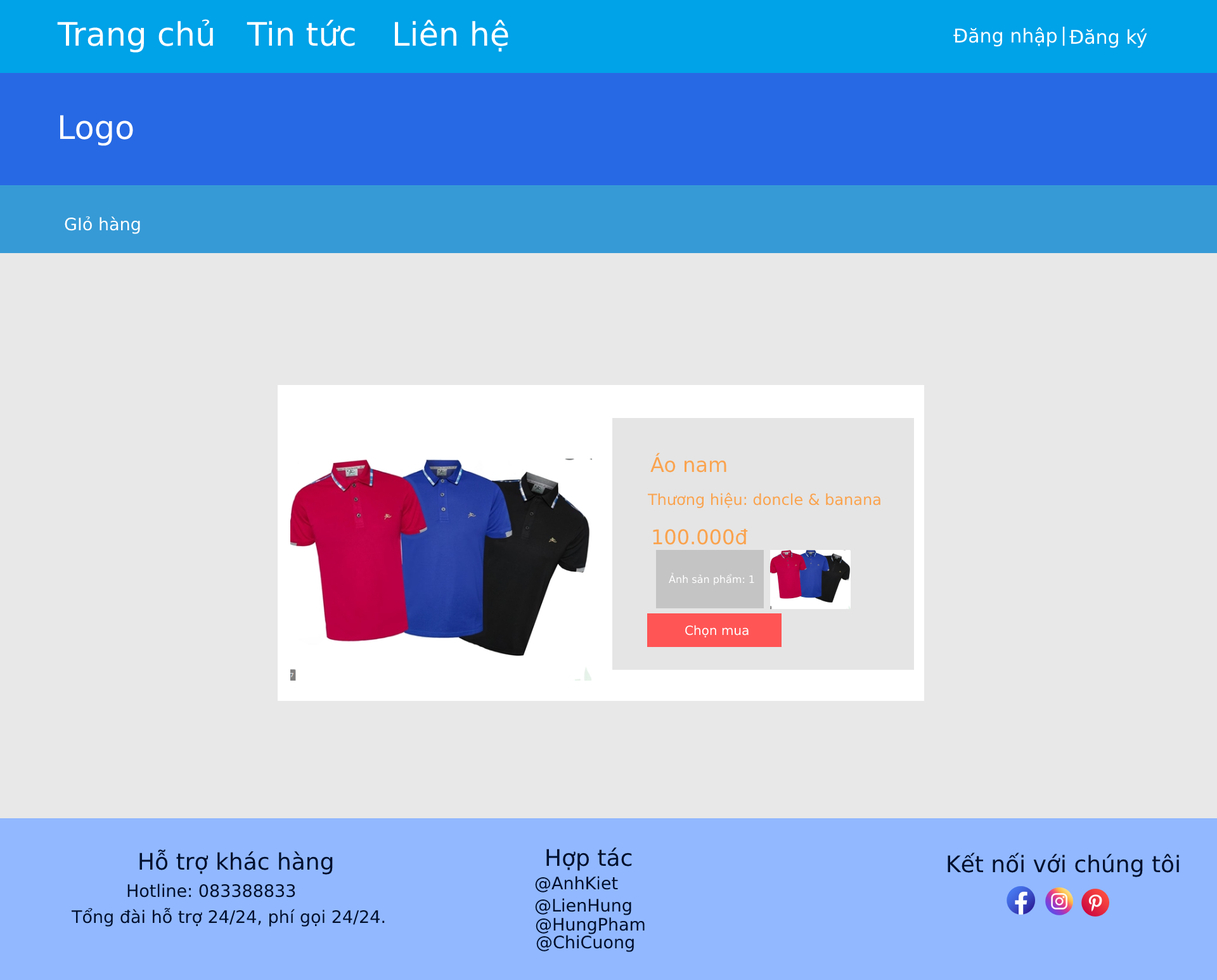
<style>
.page{position:relative;width:1217px;height:980px;background:#e8e8e8}
.page>*{position:absolute;margin:0}
.t1{font:32.3px "DejaVuSans";color:#ffffff}
.t2{font:19px "DejaVuSans";color:#ffffff}
.t3{font:17.1px "DejaVuSans";color:#ffffff}
.t4{font:20.3px "DejaVuSans";color:#faa34e}
.t5{font:15.2px "DejaVuSans";color:#faa34e}
.t6{font:10.1px "DejaVuSans";color:#ffffff}
.t7{font:12.7px "DejaVuSans";color:#ffffff}
.t8{font:22.8px "DejaVuSans";color:#00102e}
.t9{font:17.1px "DejaVuSans";color:#00102e}
</style>
<div class="page">
<p class="t1" style="left:57px;top:19px;width:156px;height:34px">Trang chủ</p>
<p class="t1" style="left:247px;top:20px;width:108px;height:26px">Tin tức</p>
<p class="t1" style="left:395px;top:20px;width:113px;height:32px">Liên hệ</p>
<p class="t2" style="left:954px;top:27px;width:104px;height:20px">Đăng nhập</p>
<p class="t2" style="left:1063px;top:27px;width:2px;height:19px">|</p>
<p class="t2" style="left:1070px;top:29px;width:78px;height:19px">Đăng ký</p>
<p class="t1" style="left:60px;top:115px;width:73px;height:31px">Logo</p>
<p class="t3" style="left:65px;top:216px;width:75px;height:18px">GIỏ hàng</p>
<p class="t4" style="left:651px;top:453px;width:76px;height:19px">Áo nam</p>
<p class="t5" style="left:647px;top:492px;width:234px;height:16px">Thương hiệu: doncle &amp; banana</p>
<p class="t4" style="left:653px;top:528px;width:95px;height:17px">100.000đ</p>
<p class="t6" style="left:669px;top:573px;width:85px;height:12px">Ảnh sản phẩm: 1</p>
<p class="t7" style="left:685px;top:625px;width:64px;height:12px">Chọn mua</p>
<p class="t8" style="left:139px;top:849px;width:194px;height:25px">Hỗ trợ khác hàng</p>
<p class="t8" style="left:547px;top:847px;width:85px;height:24px">Hợp tác</p>
<p class="t8" style="left:948px;top:852px;width:231px;height:25px">Kết nối với chúng tôi</p>
<p class="t9" style="left:535px;top:876px;width:83px;height:16px">@AnhKiet</p>
<p class="t9" style="left:127px;top:883px;width:168px;height:14px">Hotline: 083388833</p>
<p class="t9" style="left:535px;top:898px;width:96px;height:17px">@LienHung</p>
<p class="t9" style="left:71px;top:907px;width:314px;height:19px">Tổng đài hỗ trợ 24/24, phí gọi 24/24.</p>
<p class="t9" style="left:536px;top:917px;width:109px;height:17px">@HungPham</p>
<p class="t9" style="left:536px;top:935px;width:98px;height:17px">@ChiCuong</p>
</div>
